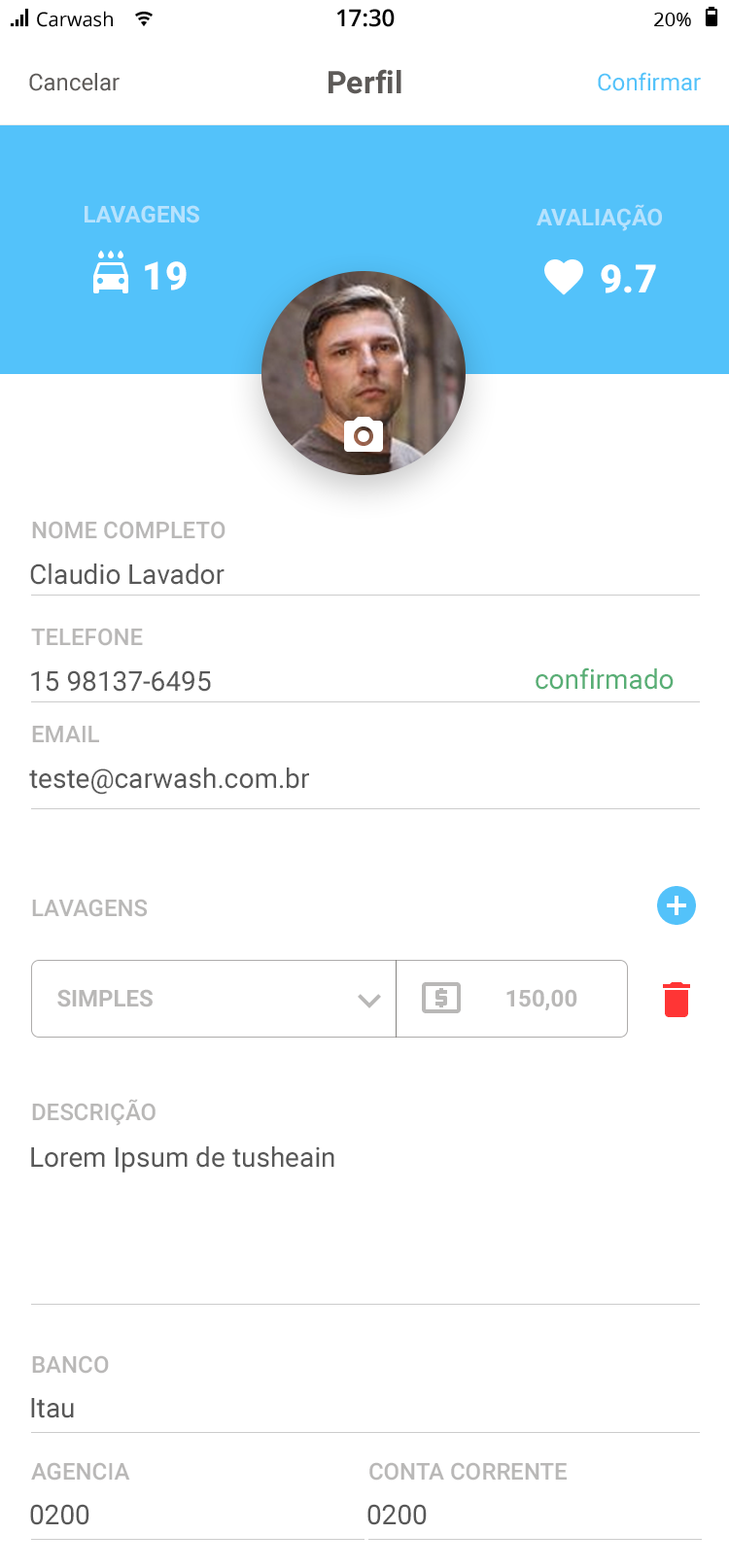
<style>
.page{position:relative;width:729px;height:1568px;background:#ffffff}
.page>*{position:absolute;margin:0}
.t1{font:23.3px "Roboto-Bold";color:#b6e2fd;text-transform:uppercase}
.t2{font:38.9px "Roboto-Black";color:#ffffff}
.t3{font:23.3px "Roboto-Medium";color:#b9b8b7;text-transform:uppercase}
.t4{font:27.2px "Roboto-Regular";color:#585858}
.t5{font:27.2px "Roboto-Regular";color:#58ae75}
.t6{font:23.3px "Roboto-Bold";color:#b9b8b7;text-transform:uppercase}
</style>
<div class="page">
<p class="t1" style="left:85px;top:205px;width:114px;height:18px">Lavagens</p>
<p class="t1" style="left:536px;top:204px;width:126px;height:27px">Avaliação</p>
<p class="t2" style="left:145px;top:261px;width:42px;height:29px">19</p>
<p class="t2" style="left:600px;top:264px;width:56px;height:29px">9.7</p>
<p class="t3" style="left:32px;top:521px;width:193px;height:18px">Nome completo</p>
<p class="t4" style="left:30px;top:563px;width:194px;height:22px">Claudio Lavador</p>
<p class="t3" style="left:31px;top:628px;width:112px;height:18px">Telefone</p>
<p class="t4" style="left:31px;top:670px;width:180px;height:22px">15 98137-6495</p>
<p class="t5" style="left:535px;top:667px;width:138px;height:23px">confirmado</p>
<p class="t3" style="left:32px;top:726px;width:67px;height:16px">email</p>
<p class="t4" style="left:29px;top:767px;width:280px;height:28px">teste@carwash.com.br</p>
<p class="t3" style="left:32px;top:899px;width:116px;height:18px">Lavagens</p>
<p class="t6" style="left:57px;top:989px;width:96px;height:18px">Simples</p>
<p class="t6" style="left:506px;top:989px;width:71px;height:22px">150,00</p>
<p class="t3" style="left:32px;top:1099px;width:123px;height:27px">Descrição</p>
<p class="t4" style="left:31px;top:1146px;width:303px;height:27px">Lorem Ipsum de tusheain</p>
<p class="t3" style="left:32px;top:1355px;width:77px;height:19px">banco</p>
<p class="t4" style="left:31px;top:1398px;width:43px;height:20px">Itau</p>
<p class="t3" style="left:31px;top:1462px;width:99px;height:19px">agencia</p>
<p class="t3" style="left:369px;top:1462px;width:197px;height:19px">conta corrente</p>
<p class="t4" style="left:30px;top:1504px;width:59px;height:21px">0200</p>
<p class="t4" style="left:367px;top:1504px;width:59px;height:21px">0200</p>
</div>
